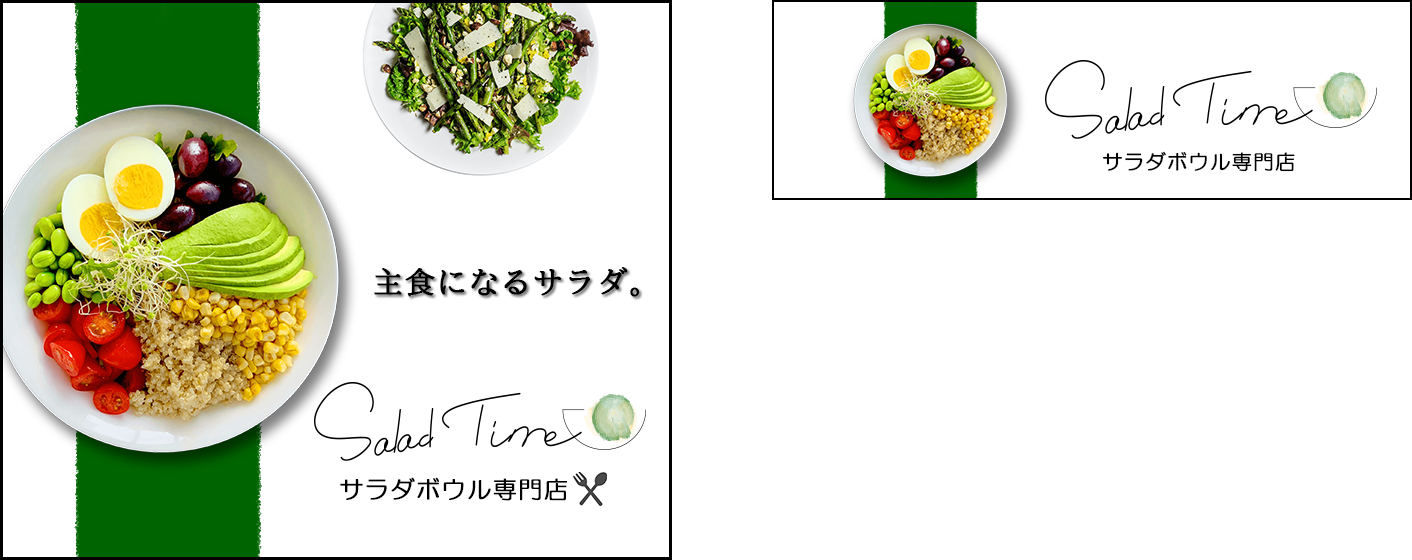
<style>
.page{position:relative;width:1412px;height:560px;background:#ffffff}
.page>*{position:absolute;margin:0}
.t1{font:20.2px "HGMaruGothicMPRO";letter-spacing:0.04em;color:#000000;font-weight:bold}
.t2{font:30px "BIZ-UDMincho-Medium";letter-spacing:0.04em;color:#000000;font-weight:bold}
.t3{font:24px "HGMaruGothicMPRO";letter-spacing:0.04em;color:#000000;font-weight:bold}
</style>
<div class="page">
<p class="t1" style="left:1103px;top:151px;width:192px;height:21px">サラダボウル専門店</p>
<p class="t2" style="left:374px;top:267px;width:266px;height:30px">主食になるサラダ。</p>
<p class="t3" style="left:340px;top:477px;width:227px;height:24px">サラダボウル専門店</p>
</div>
